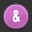
<style>
.page{position:relative;width:32px;height:32px;background:#333333}
.page>*{position:absolute;margin:0}
.t1{font:16.2px "Arial-BoldMT";letter-spacing:-0.04em;color:#ffffff;scale:0.71 1}
</style>
<div class="page">
<p class="t1" style="left:12px;top:10px;width:8px;height:12px">&amp;</p>
</div>
